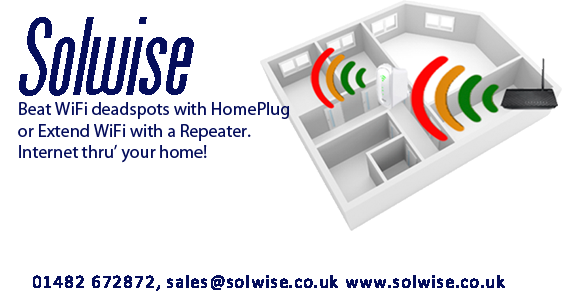
<style>
.page{position:relative;width:562px;height:300px;background:#ffffff}
.page>*{position:absolute;margin:0}
.t1{font:107.9px "Arizona";color:#050e5c;font-style:italic}
.t2{font:18px "MyriadPro-Regular";color:#050e5c}
.t3{font:18px "Calibri";color:#050e5c;font-weight:bold}
</style>
<div class="page">
<p class="t1" style="left:19px;top:17px;width:175px;height:79px">Solwise</p>
<p class="t2" style="left:18px;top:102px;width:271px;height:61px">Beat WiFi deadspots with HomePlug<br>or Extend WiFi with a Repeater. <br>Internet thru’ your home!</p>
<p class="t3" style="left:33px;top:275px;width:472px;height:16px">01482 672872, sales@solwise.co.uk www.solwise.co.uk</p>
</div>
